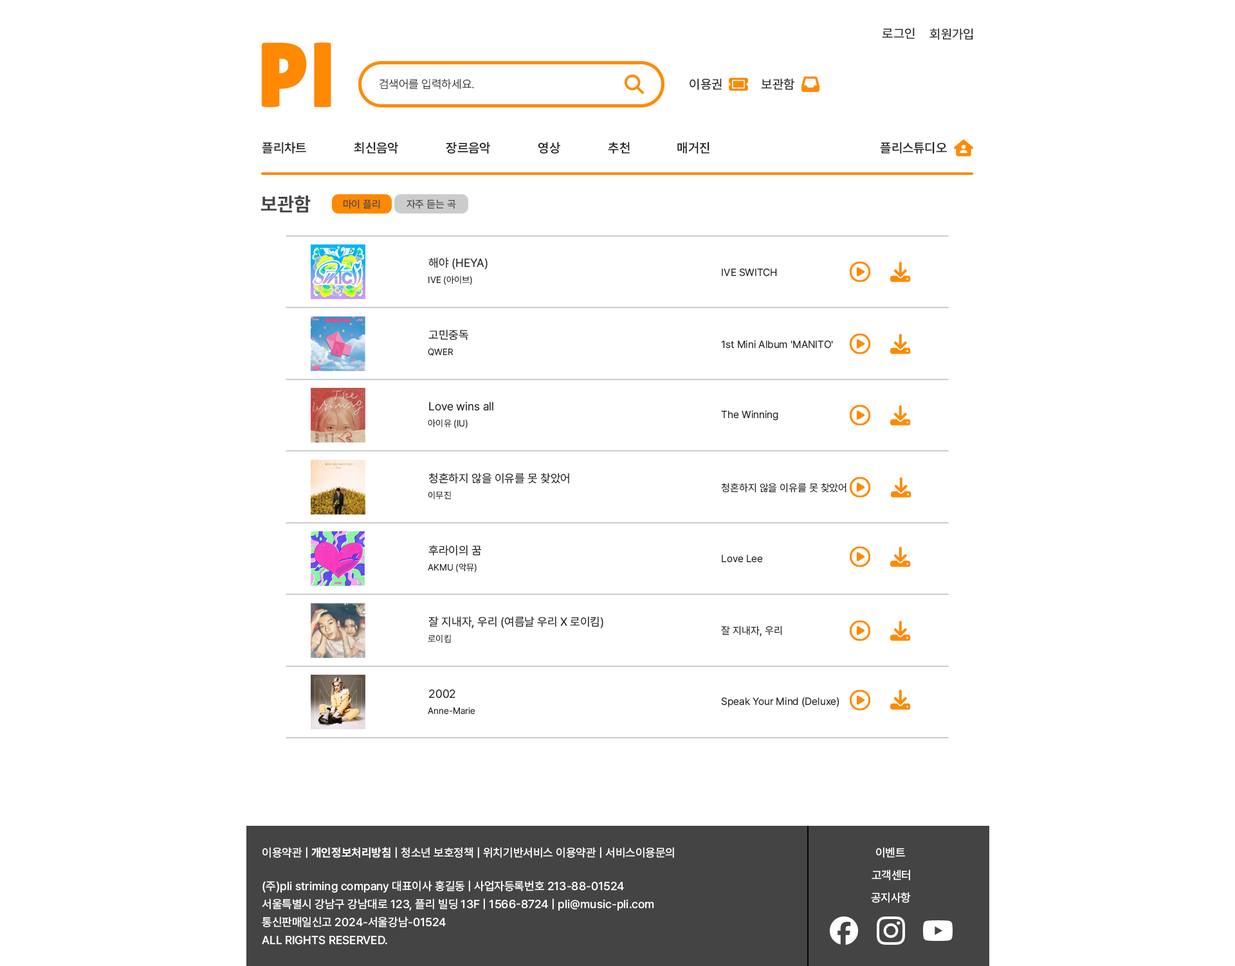
<style>
.page{position:relative;width:1235px;height:966px;background:#ffffff}
.page>*{position:absolute;margin:0}
.t1{font:12.9px "Pretendard-Medium";color:#222222}
.t2{font:11.6px "Pretendard-Light";color:#222222}
.t3{font:12.9px "Pretendard-SemiBold";color:#222222}
.t4{font:19.3px "Pretendard-Bold";color:#444444}
.t5{font:10.3px "Pretendard-Regular";color:#444444}
.t6{font:11.6px "Pretendard-Regular";color:#222222}
.t7{font:10.3px "Pretendard-Regular";color:#222222}
.t8{font:9px "Pretendard-Regular";color:#222222}
.t9{font:11.6px "Pretendard-Medium";color:#ffffff}
.t10{font:11.6px "Pretendard-Bold";color:#ffffff}
.t11{font:11.6px/18px "Pretendard-Medium";color:#ffffff}
</style>
<div class="page">
<p class="t1" style="left:882px;top:28px;width:32px;height:11px">로그인</p>
<p class="t1" style="left:929px;top:28px;width:44px;height:12px">회원가입</p>
<p class="t2" style="left:379px;top:78px;width:95px;height:11px">검색어를 입력하세요.</p>
<p class="t1" style="left:689px;top:78px;width:32px;height:12px">이용권</p>
<p class="t1" style="left:761px;top:78px;width:33px;height:12px">보관함</p>
<p class="t3" style="left:262px;top:142px;width:44px;height:12px">플리차트</p>
<p class="t3" style="left:354px;top:142px;width:44px;height:12px">최신음악</p>
<p class="t3" style="left:446px;top:142px;width:44px;height:12px">장르음악</p>
<p class="t3" style="left:538px;top:142px;width:22px;height:12px">영상</p>
<p class="t3" style="left:608px;top:142px;width:22px;height:12px">추천</p>
<p class="t3" style="left:677px;top:142px;width:32px;height:12px">매거진</p>
<p class="t3" style="left:880px;top:142px;width:67px;height:12px">플리스튜디오</p>
<p class="t4" style="left:260px;top:195px;width:51px;height:18px">보관함</p>
<p class="t5" style="left:343px;top:199px;width:37px;height:10px">마이 플리</p>
<p class="t5" style="left:406px;top:199px;width:50px;height:10px">자주 듣는 곡</p>
<p class="t6" style="left:428px;top:257px;width:59px;height:12px">해야 (HEYA)</p>
<p class="t7" style="left:721px;top:268px;width:56px;height:9px">IVE SWITCH</p>
<p class="t8" style="left:428px;top:275px;width:44px;height:10px">IVE (아이브)</p>
<p class="t6" style="left:428px;top:329px;width:40px;height:11px">고민중독</p>
<p class="t7" style="left:721px;top:340px;width:112px;height:9px">1st Mini Album 'MANITO'</p>
<p class="t8" style="left:428px;top:348px;width:25px;height:8px">QWER</p>
<p class="t6" style="left:429px;top:401px;width:64px;height:10px">Love wins all</p>
<p class="t7" style="left:721px;top:410px;width:57px;height:11px">The Winning</p>
<p class="t8" style="left:428px;top:419px;width:39px;height:9px">아이유 (IU)</p>
<p class="t6" style="left:428px;top:473px;width:141px;height:11px">청혼하지 않을 이유를 못 찾았어</p>
<p class="t7" style="left:721px;top:483px;width:125px;height:10px">청혼하지 않을 이유를 못 찾았어</p>
<p class="t8" style="left:428px;top:491px;width:23px;height:9px">이무진</p>
<p class="t6" style="left:428px;top:545px;width:53px;height:11px">후라이의 꿈</p>
<p class="t7" style="left:721px;top:554px;width:42px;height:9px">Love Lee</p>
<p class="t8" style="left:428px;top:563px;width:48px;height:9px">AKMU (악뮤)</p>
<p class="t6" style="left:428px;top:616px;width:175px;height:12px">잘 지내자, 우리 (여름날 우리 X 로이킴)</p>
<p class="t7" style="left:721px;top:626px;width:61px;height:11px">잘 지내자, 우리</p>
<p class="t8" style="left:428px;top:634px;width:23px;height:9px">로이킴</p>
<p class="t6" style="left:429px;top:689px;width:26px;height:9px">2002</p>
<p class="t7" style="left:721px;top:697px;width:118px;height:10px">Speak Your Mind (Deluxe)</p>
<p class="t8" style="left:428px;top:707px;width:47px;height:7px">Anne-Marie</p>
<p class="t9" style="left:262px;top:847px;width:412px;height:11px">이용약관 | <span class="t10">개인정보처리방침</span> | 청소년 보호정책 | 위치기반서비스 이용약관 | 서비스이용문의</p>
<p class="t9" style="left:876px;top:847px;width:29px;height:11px">이벤트</p>
<p class="t9" style="left:871px;top:869px;width:39px;height:11px">고객센터</p>
<p class="t11" style="left:262px;top:880px;width:392px;height:65px">(주)pli striming company 대표이사 홍길동 | 사업자등록번호 213-88-01524<br>서울특별시 강남구 강남대로 123, 플리 빌딩 13F | 1566-8724 | pli@music-pli.com<br>통신판매일신고 2024-서울강남-01524      <br>ALL RIGHTS RESERVED.</p>
<p class="t9" style="left:871px;top:892px;width:40px;height:11px">공지사항</p>
</div>
